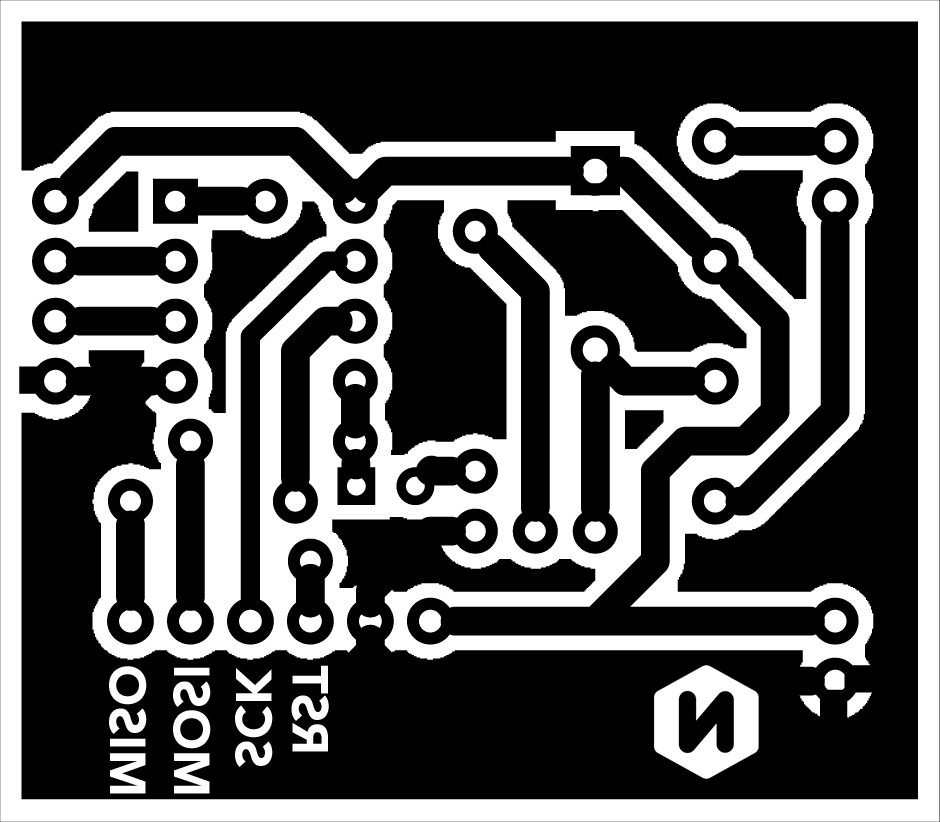
<style>
.page{position:relative;width:940px;height:822px;background:#000000}
.page>*{position:absolute;margin:0}
.t1{font:50px "Avenir-Black";color:#ffffff}
</style>
<div class="page">
<p class="t1" style="left:291px;top:665px;width:38px;height:87px;rotate:-90deg">RST</p>
<p class="t1" style="left:109px;top:666px;width:38px;height:128px;rotate:-90deg">MISO</p>
<p class="t1" style="left:173px;top:667px;width:38px;height:127px;rotate:-90deg">MOSI</p>
<p class="t1" style="left:235px;top:668px;width:38px;height:99px;rotate:-90deg">SCK</p>
</div>
